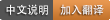
<style>
.page{position:relative;width:110px;height:20px;background:#545454}
.page>*{position:absolute;margin:0}
.t1{font:11px "AdobeHeitiStd-Regular";color:#ffffff}
</style>
<div class="page">
<p class="t1" style="left:6px;top:4px;width:42px;height:11px">中文说明</p>
<p class="t1" style="left:60px;top:4px;width:44px;height:11px">加入翻译</p>
</div>
